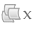
<style>
.page{position:relative;width:35px;height:29px;background:#ffffff}
.page>*{position:absolute;margin:0}
.t1{font:17.4px "BookAntiqua";color:#666666}
</style>
<div class="page">
<p class="t1" style="left:23px;top:10px;width:9px;height:10px">x</p>
</div>
